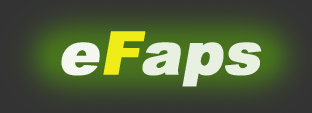
<style>
.page{position:relative;width:312px;height:113px}
.page>*{position:absolute;margin:0}
.t1{font:59.8px "Arial-Black";color:#e8f0e2;font-weight:bold;font-style:italic}
.t2{font:59.8px "Arial-Black";color:#f3f7ef;font-weight:bold;font-style:italic}
.t3{font:59.8px "Arial-Black";color:#efec18;font-weight:bold;font-style:italic}
</style>
<div class="page">
<p class="t1" style="left:61px;top:31px;width:201px;height:56px"><span class="t2">e</span><span class="t3">F</span>aps</p>
</div>
